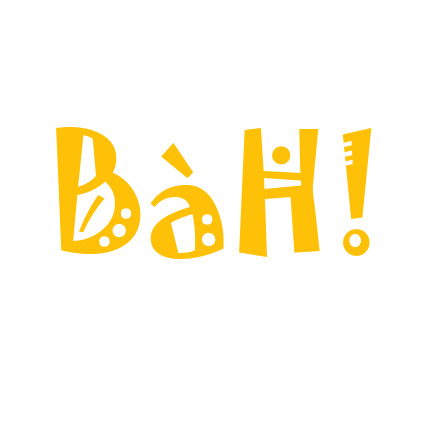
<style>
.page{position:relative;width:432px;height:432px;background:#ffffff}
.page>*{position:absolute;margin:0}
.t1{font:147.7px "Jokerman-Regular";color:#ffc107}
</style>
<div class="page">
<p class="t1" style="left:56px;top:127px;width:316px;height:132px">BàH!!</p>
</div>
